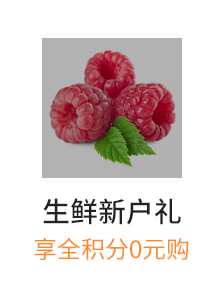
<style>
.page{position:relative;width:224px;height:282px;background:#ffffff}
.page>*{position:absolute;margin:0}
.t1{font:28px "SourceHanSansCN-Medium";color:#222222}
.t2{font:24px "SourceHanSansCN-Regular";color:#ff8822}
</style>
<div class="page">
<p class="t1" style="left:43px;top:198px;width:138px;height:27px">生鲜新户礼</p>
<p class="t2" style="left:34px;top:237px;width:155px;height:23px">享全积分0元购</p>
</div>
